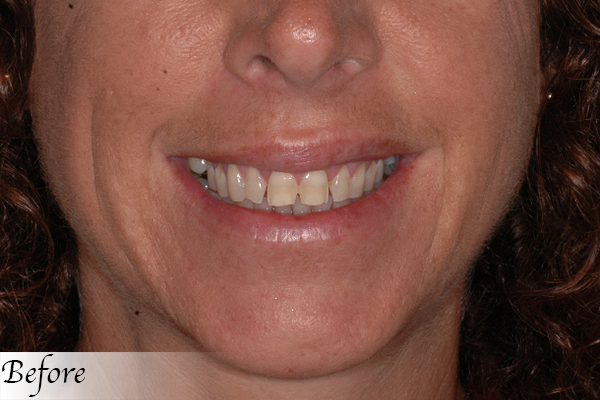
<style>
.page{position:relative;width:600px;height:400px}
.page>*{position:absolute;margin:0}
.t1{font:56px "Apple-Chancery";color:#000000}
</style>
<div class="page">
<p class="t1" style="left:2px;top:354px;width:83px;height:43px">Before</p>
</div>
